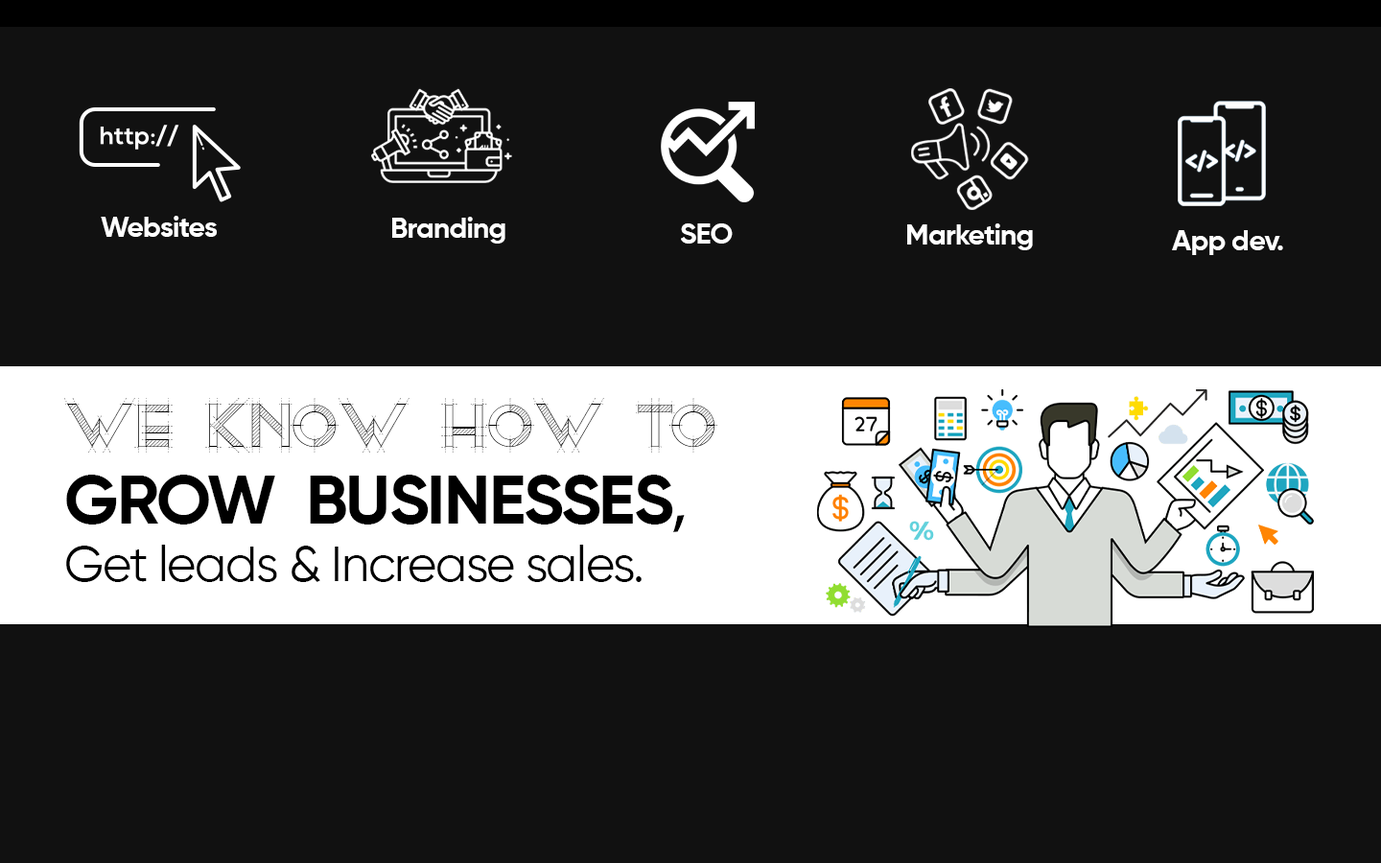
<style>
.page{position:relative;width:1381px;height:863px;background:#111111}
.page>*{position:absolute;margin:0}
.t1{font:28.8px "Gilroy-Bold";letter-spacing:-0.025em;color:#ffffff}
.t2{font:49.9px/57.6px "Gilroy-Regular";letter-spacing:-0.025em;color:#000000}
.t3{font:69.1px/76.7px "RollandinEmilie";letter-spacing:-0.025em;color:#000000}
.t4{font:69.1px/76.7px "Gilroy-Bold";letter-spacing:-0.025em;color:#000000}
.t5{font:69.1px/76.7px "MyriadPro-Regular";letter-spacing:-0.025em;color:#000000}
</style>
<div class="page">
<p class="t1" style="left:101px;top:216px;width:116px;height:21px">Websites</p>
<p class="t1" style="left:392px;top:217px;width:114px;height:27px">Branding</p>
<p class="t1" style="left:681px;top:223px;width:52px;height:21px">SEO</p>
<p class="t1" style="left:907px;top:223px;width:126px;height:27px">Marketing</p>
<p class="t1" style="left:1172px;top:230px;width:111px;height:25px">App dev.</p>
<p class="t2" style="left:64px;top:398px;width:653px;height:184px"><span class="t3">WE KNOW HOW TO <br></span><span class="t4">GROW  BUSINESSES</span><span class="t5">,<br></span>Get leads &amp; Increase sales.</p>
</div>
